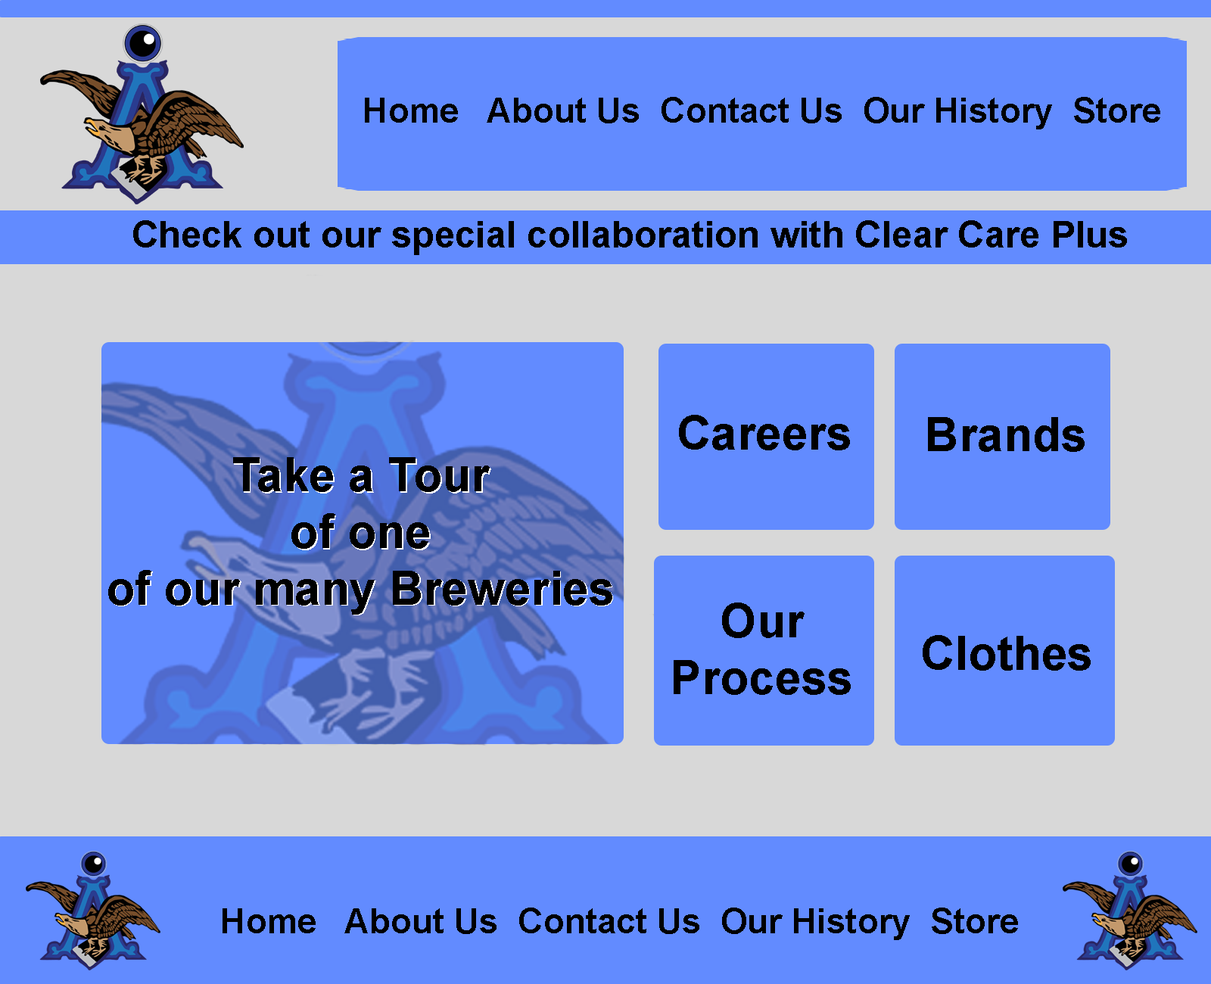
<style>
.page{position:relative;width:1211px;height:984px;background:#628bff}
.page>*{position:absolute;margin:0}
.t1{font:34.7px "Arial-BoldMT";color:#000000}
.t2{font:37.1px "Arial-BoldMT";color:#000000}
.t3{font:47.3px "Arial-BoldMT";color:#000000}
</style>
<div class="page">
<p class="t1" style="left:365px;top:97px;width:796px;height:32px">Home   About Us  Contact Us  Our History  Store</p>
<p class="t2" style="left:133px;top:220px;width:994px;height:35px">Check out our special collaboration with Clear Care Plus</p>
<p class="t3" style="left:679px;top:415px;width:171px;height:36px">Careers</p>
<p class="t3" style="left:928px;top:417px;width:157px;height:35px">Brands</p>
<p class="t3" style="left:108px;top:457px;width:505px;height:158px;text-align:center">Take a Tour<br>of one <br>of our many Breweries</p>
<p class="t3" style="left:109px;top:459px;width:504px;height:157px;text-align:center">Take a Tour<br>of one <br>of our many Breweries</p>
<p class="t3" style="left:674px;top:603px;width:177px;height:92px;text-align:center">Our<br>Process</p>
<p class="t3" style="left:923px;top:635px;width:168px;height:36px">Clothes</p>
<p class="t1" style="left:223px;top:908px;width:795px;height:32px">Home   About Us  Contact Us  Our History  Store</p>
</div>
